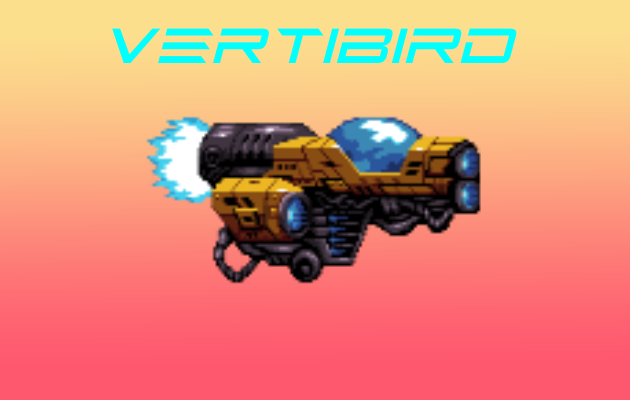
<style>
.page{position:relative;width:630px;height:400px}
.page>*{position:absolute;margin:0}
.t1{font:55px "FutureZ-Italic";color:#00ffff}
</style>
<div class="page">
<p class="t1" style="left:112px;top:28px;width:406px;height:35px">Vertibird</p>
</div>
